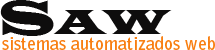
<style>
.page{position:relative;width:215px;height:50px;background:#ffffff}
.page>*{position:absolute;margin:0}
.t1{font:36px "LatinWide";color:#0e0d0d}
.t2{font:48px "LatinWide";color:#0e0d0d}
.t3{font:18px "BellGothicStd-Bold";color:#f87f12}
</style>
<div class="page">
<p class="t1" style="left:0px;top:0px;width:172px;height:36px"><span class="t2">S</span>AW</p>
<p class="t3" style="left:2px;top:36px;width:213px;height:14px">sistemas automatizados web</p>
</div>
